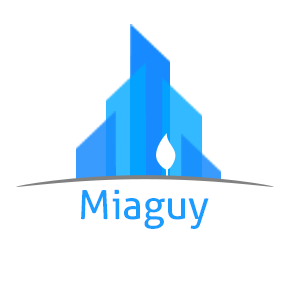
<style>
.page{position:relative;width:300px;height:300px;background:#ffffff}
.page>*{position:absolute;margin:0}
.t1{font:40px "Aller";color:#1b9cff}
</style>
<div class="page">
<p class="t1" style="left:81px;top:189px;width:128px;height:40px">Miaguy</p>
</div>
